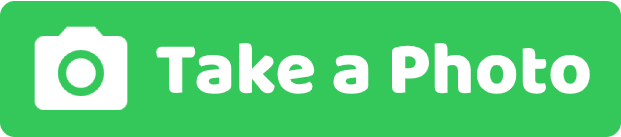
<style>
.page{position:relative;width:621px;height:137px;background:#34c759}
.page>*{position:absolute;margin:0}
.t1{font:75px "Baloo-Regular";color:#ffffff}
</style>
<div class="page">
<p class="t1" style="left:156px;top:43px;width:434px;height:51px">Take a Photo</p>
</div>
